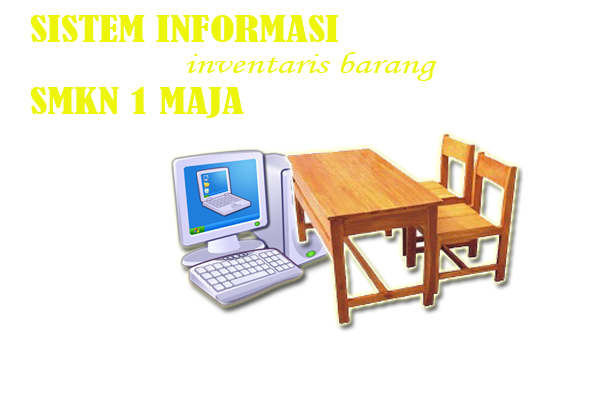
<style>
.page{position:relative;width:600px;height:400px;background:#ffffff}
.page>*{position:absolute;margin:0}
.t1{font:34px "BernardMT-Condensed";color:#ecf50a;scale:1.35 1}
.t2{font:30px "MonotypeCorsiva";color:#ecf50a;scale:1.35 1}
</style>
<div class="page">
<p class="t1" style="left:30px;top:15px;width:309px;height:27px">SISTEM INFORMASI</p>
<p class="t2" style="left:187px;top:52px;width:250px;height:29px">inventaris barang</p>
<p class="t1" style="left:30px;top:87px;width:214px;height:31px">SMKN 1 MAJA</p>
</div>
